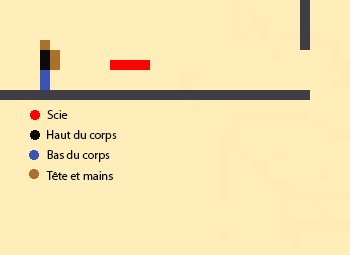
<style>
.page{position:relative;width:350px;height:255px;background:#ffedba}
.page>*{position:absolute;margin:0}
.t1{font:12px "MyriadPro-Regular";color:#080707}
</style>
<div class="page">
<p class="t1" style="left:47px;top:110px;width:21px;height:9px">Scie</p>
<p class="t1" style="left:47px;top:130px;width:70px;height:12px">Haut du corps</p>
<p class="t1" style="left:47px;top:150px;width:63px;height:12px">Bas du corps</p>
<p class="t1" style="left:46px;top:171px;width:67px;height:9px">Tête et mains</p>
</div>
